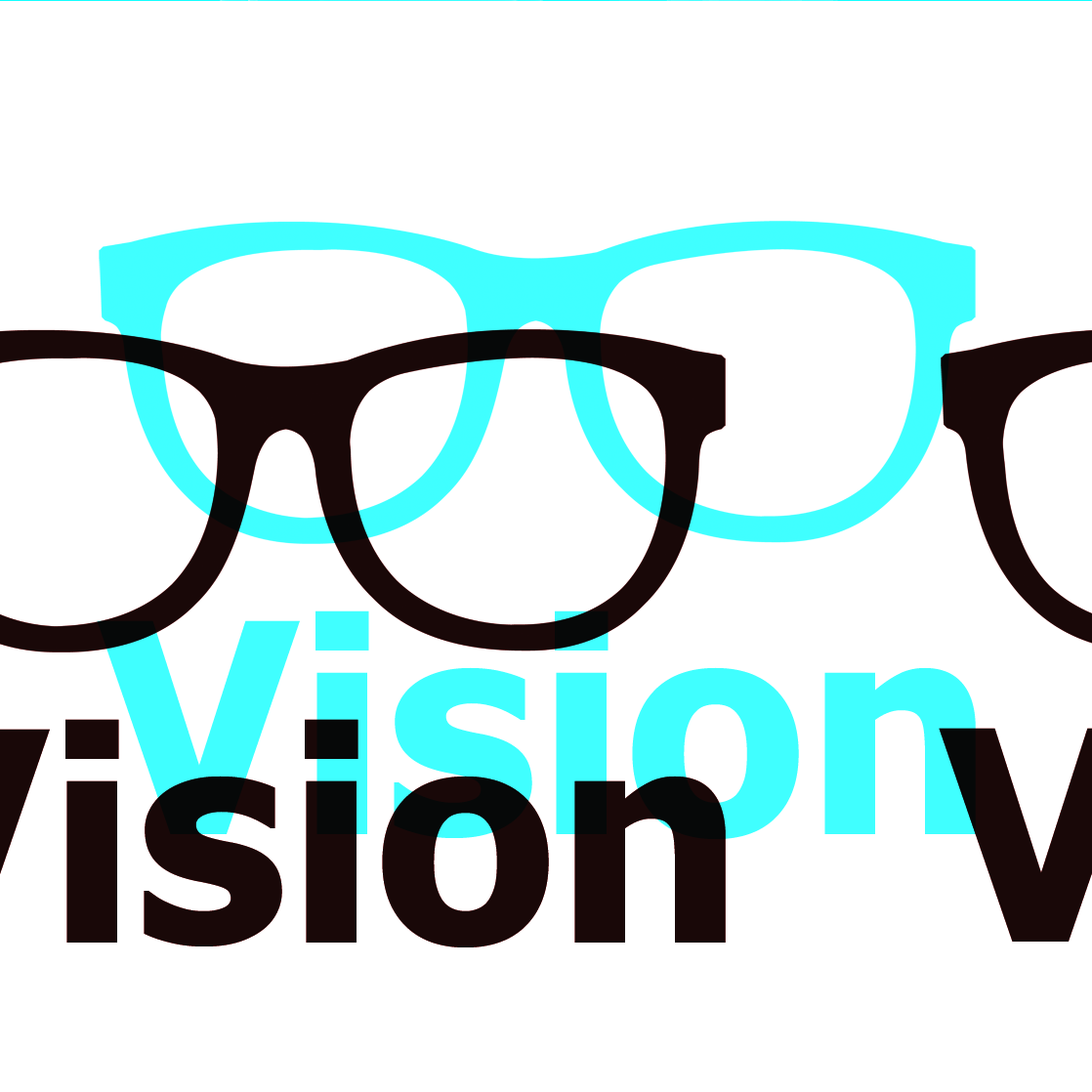
<style>
.page{position:relative;width:1092px;height:1092px;background:#ffffff}
.page>*{position:absolute;margin:0}
.t1{font:293px "Tahoma-Bold";color:#40ffff}
</style>
<div class="page">
<p class="t1" style="left:97px;top:609px;width:879px;height:229px">Vision</p>
</div>
